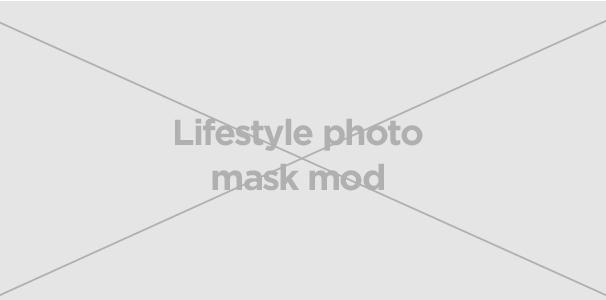
<style>
.page{position:relative;width:606px;height:300px;background:#e5e5e5}
.page>*{position:absolute;margin:0}
.t1{font:36.1px/45.1px "GothamBold";letter-spacing:-0.05em;color:#b1b0b0}
</style>
<div class="page">
<p class="t1" style="left:175px;top:118px;width:248px;height:73px;text-align:center">Lifestyle photo<br>mask mod</p>
</div>
